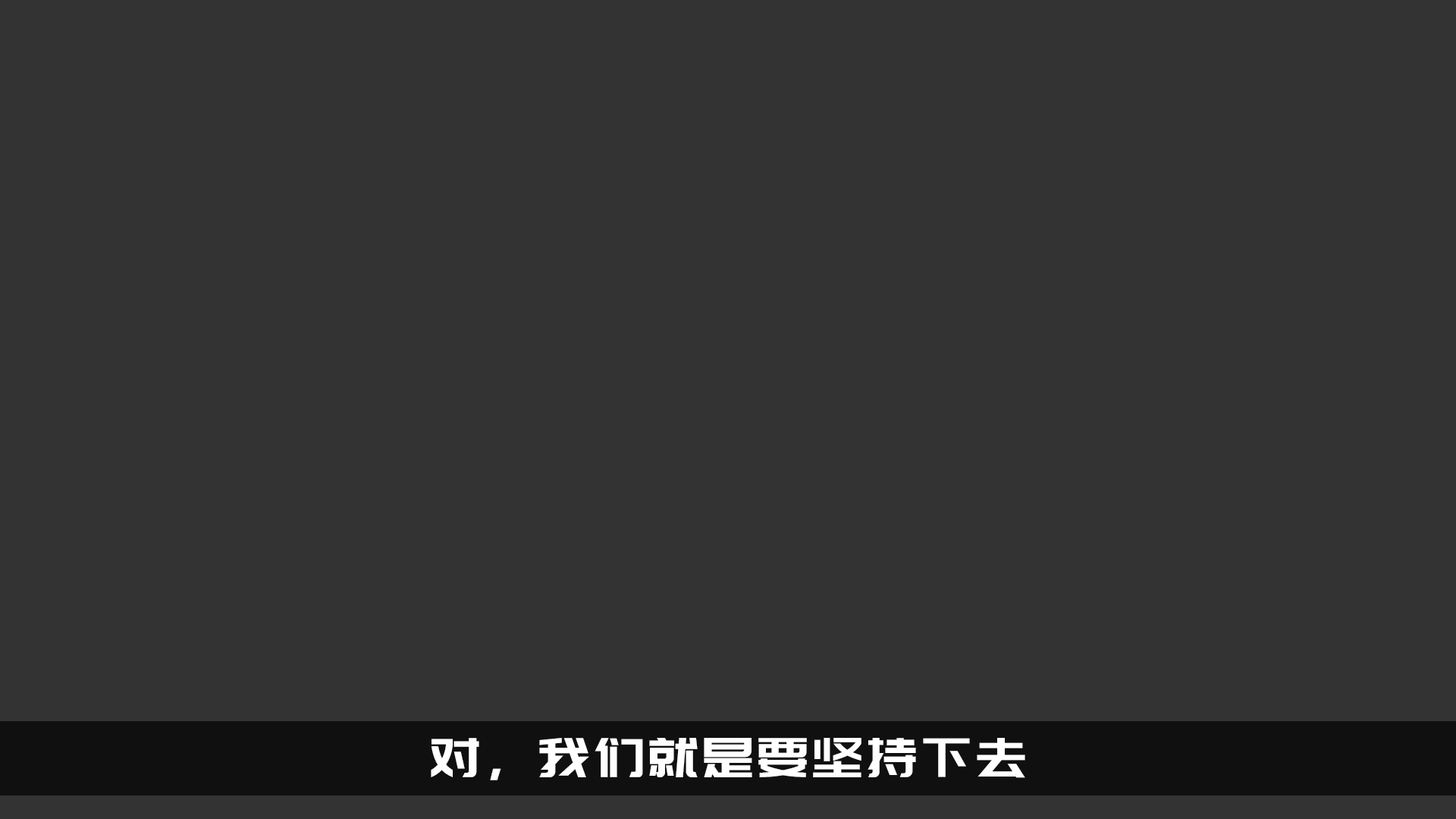
<style>
.page{position:relative;width:1456px;height:819px;background:#333333}
.page>*{position:absolute;margin:0}
.t1{font:54.6px "PangMenZhengDao-3";color:#ffffff}
</style>
<div class="page">
<p class="t1" style="left:431px;top:738px;width:594px;height:42px">对，我们就是要坚持下去</p>
</div>
